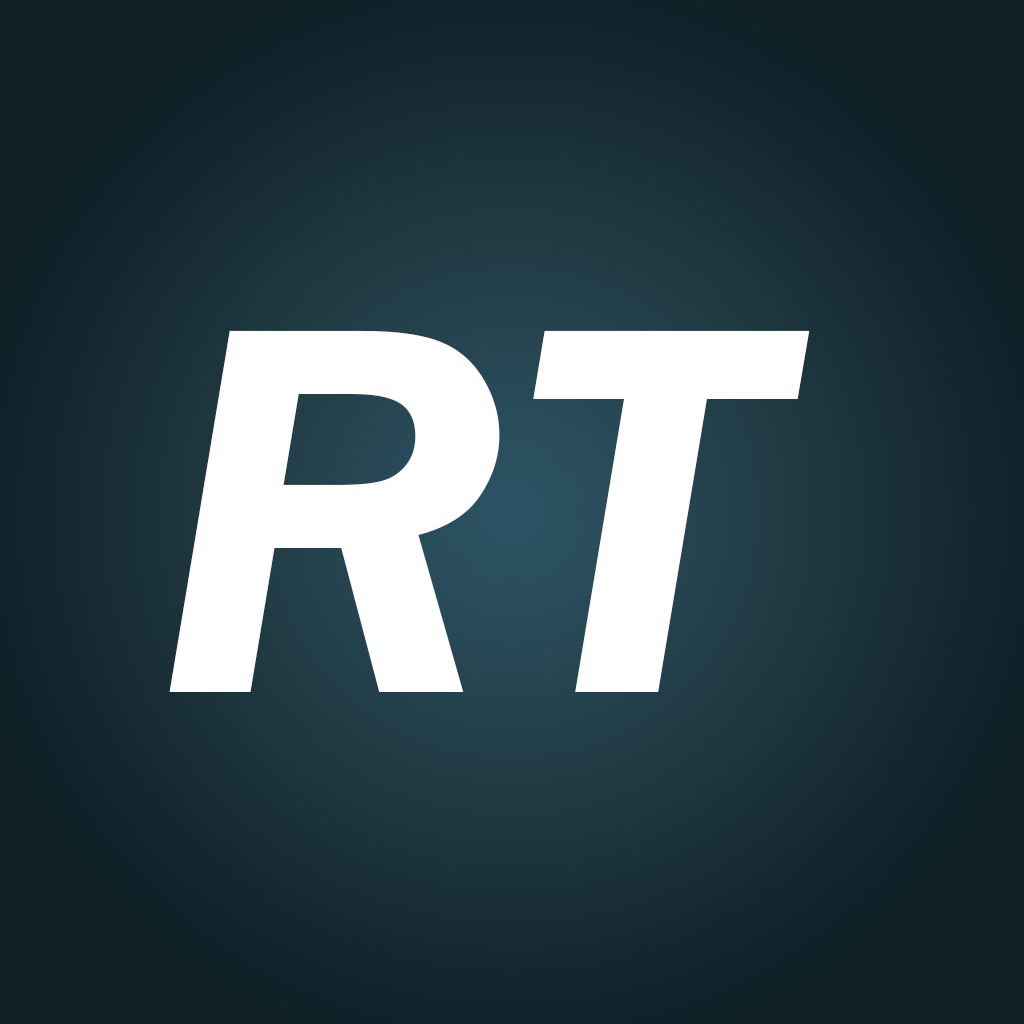
<style>
.page{position:relative;width:1024px;height:1024px}
.page>*{position:absolute;margin:0}
.t1{font:541.2px "FranklinGothic-DemiItalic";color:#ffffff}
</style>
<div class="page">
<p class="t1" style="left:169px;top:330px;width:641px;height:362px">RT</p>
</div>
